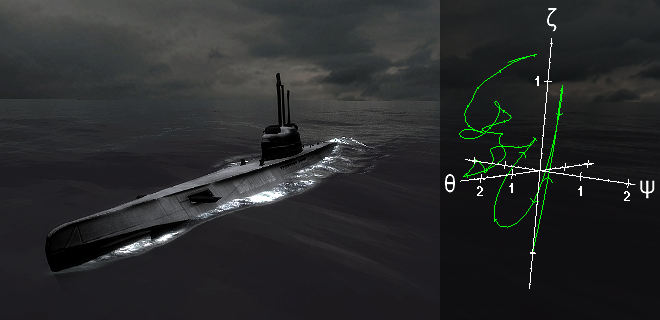
<style>
.page{position:relative;width:660px;height:320px}
.page>*{position:absolute;margin:0}
.t1{font:14px "ArialNarrow";letter-spacing:0.05em;color:#ffffff;font-weight:bold}
</style>
<div class="page">
<p class="t1" style="left:535px;top:76px;width:4px;height:10px">1</p>
<p class="t1" style="left:509px;top:183px;width:4px;height:10px">1</p>
<p class="t1" style="left:477px;top:186px;width:6px;height:10px">2</p>
<p class="t1" style="left:578px;top:186px;width:4px;height:10px">1</p>
<p class="t1" style="left:624px;top:191px;width:6px;height:10px">2</p>
</div>
